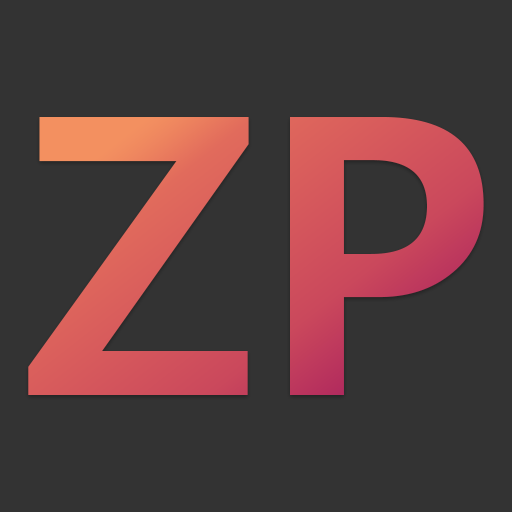
<style>
.page{position:relative;width:512px;height:512px;background:#333333}
.page>*{position:absolute;margin:0}
.t1{font:387px "MalgunGothicBold";color:#d5585c}
</style>
<div class="page">
<p class="t1" style="left:28px;top:117px;width:456px;height:278px">ZP</p>
</div>
